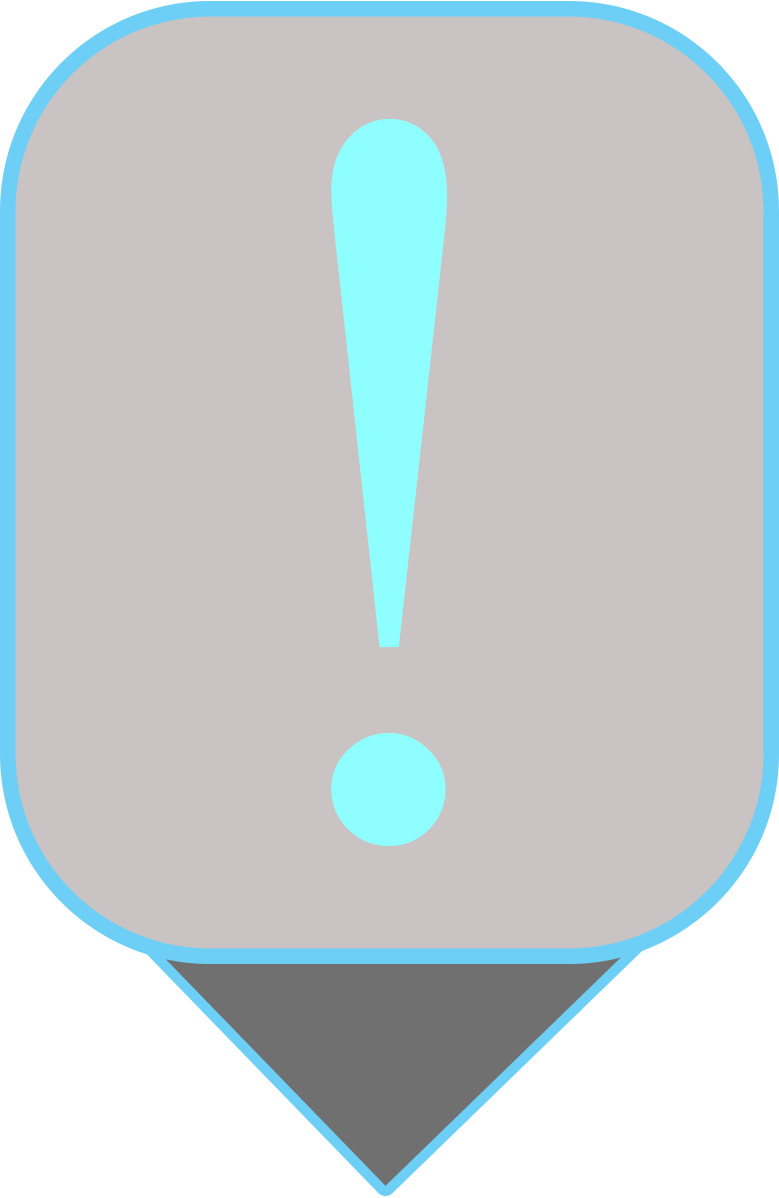
<style>
.page{position:relative;width:779px;height:1198px;background:#c9c3c3}
.page>*{position:absolute;margin:0}
.t1{font:1570.3px "Microsoft-Himalaya";color:#8efffe}
</style>
<div class="page">
<p class="t1" style="left:331px;top:119px;width:117px;height:727px">!</p>
</div>
